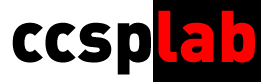
<style>
.page{position:relative;width:261px;height:82px;background:#ffffff}
.page>*{position:absolute;margin:0}
.t1{font:72px "DIN-Black";color:#000000}
.t2{font:72px "DIN-Black";color:#ff0000}
</style>
<div class="page">
<p class="t1" style="left:12px;top:10px;width:243px;height:65px">ccsp<span class="t2">lab</span></p>
</div>
